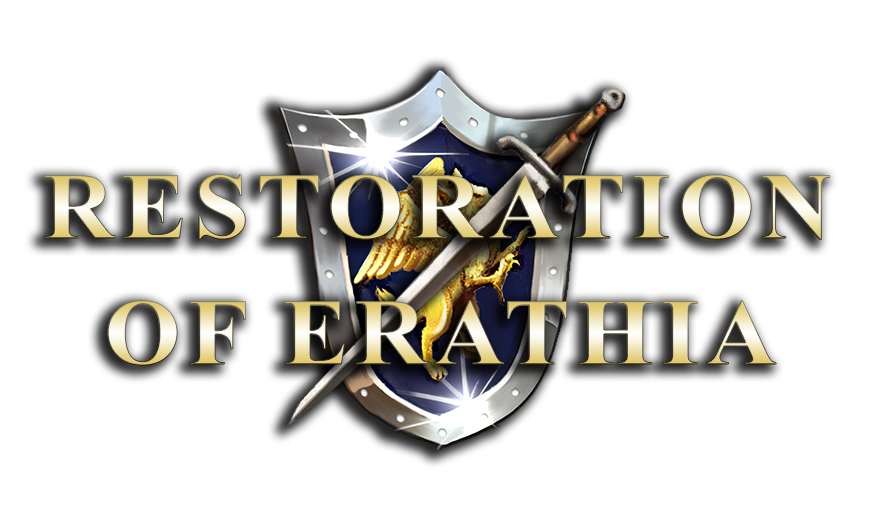
<style>
.page{position:relative;width:880px;height:508px;background:#ffffff}
.page>*{position:absolute;margin:0}
.t1{font:94px "TimesNewRomanPS-BoldMT";letter-spacing:0.07em;scale:1.05 1}
</style>
<div class="page">
<p class="t1" style="left:44px;top:174px;width:786px;height:66px">RESTORATION</p>
<p class="t1" style="left:107px;top:300px;width:669px;height:66px">OF ERATHIA</p>
</div>
